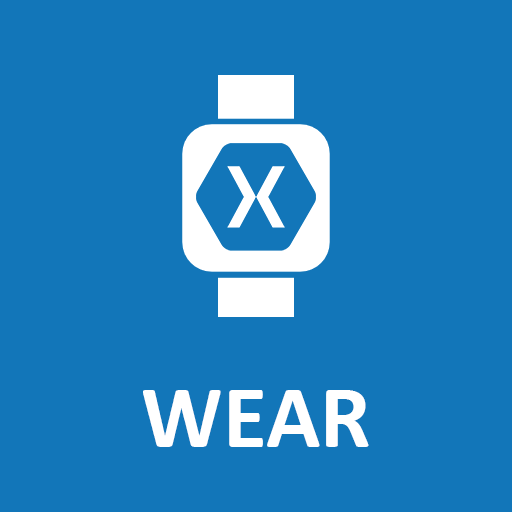
<style>
.page{position:relative;width:512px;height:512px;background:#1276b9}
.page>*{position:absolute;margin:0}
.t1{font:90px "Calibri-Bold";color:#ffffff;text-transform:uppercase}
</style>
<div class="page">
<p class="t1" style="left:143px;top:390px;width:226px;height:57px">WEAR</p>
</div>
